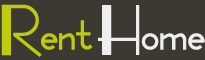
<style>
.page{position:relative;width:205px;height:60px;background:#3c3932}
.page>*{position:absolute;margin:0}
.t1{font:70px "FashionVictim";color:#becb0c}
.t2{font:70px "FashionVictim";color:#eeeeee}
</style>
<div class="page">
<p class="t1" style="left:1px;top:4px;width:92px;height:53px">Rent</p>
<p class="t2" style="left:98px;top:5px;width:107px;height:50px">Home</p>
</div>
